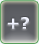
<style>
.page{position:relative;width:39px;height:44px}
.page>*{position:absolute;margin:0}
.t1{font:16px "Verdana-Bold";color:#ebeefa}
</style>
<div class="page">
<p class="t1" style="left:7px;top:17px;width:22px;height:12px">+?</p>
</div>
